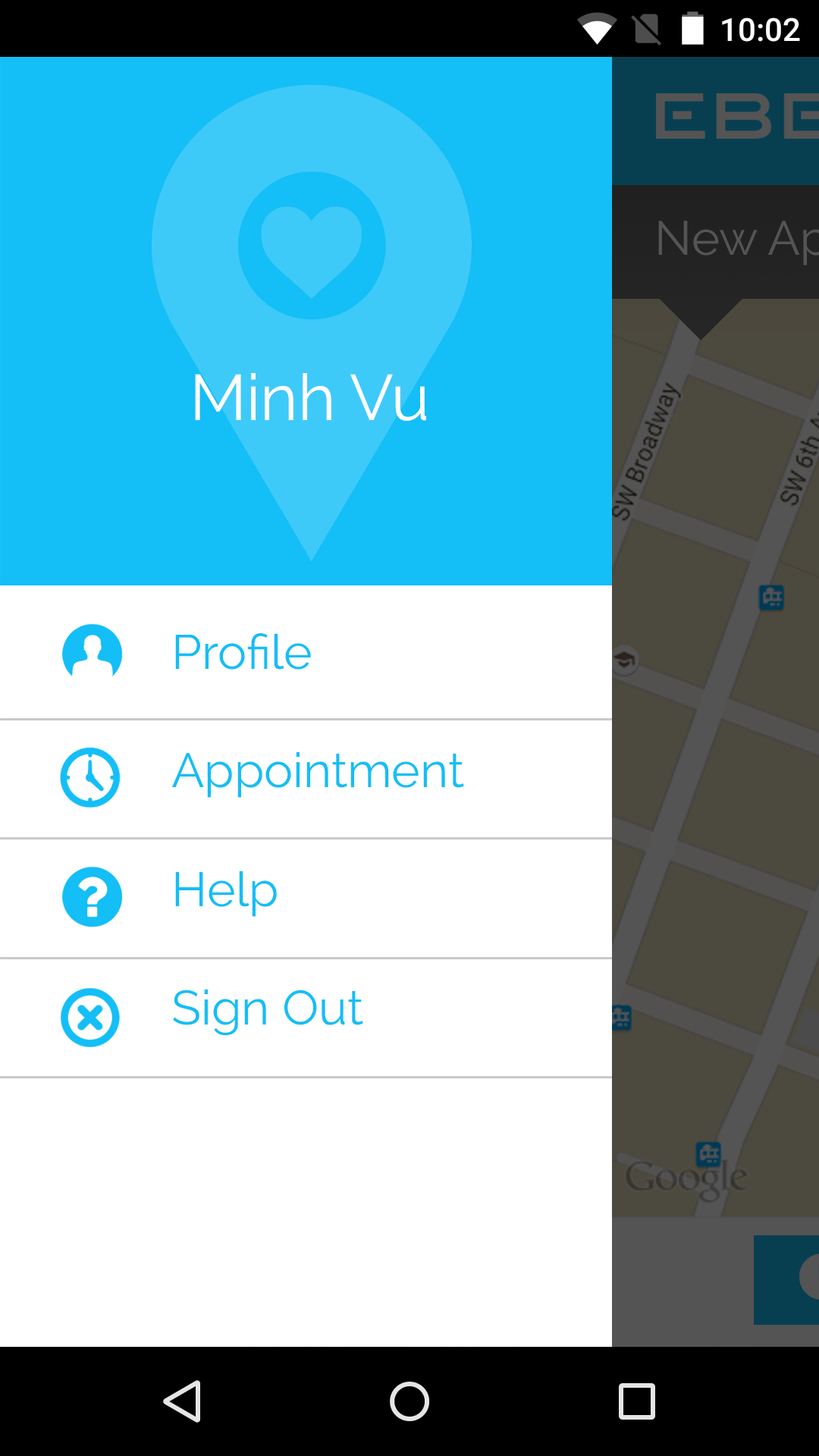
<style>
.page{position:relative;width:819px;height:1456px;background:#ffffff}
.page>*{position:absolute;margin:0}
.t1{font:64.4px "Raleway";color:#ffffff}
.t2{font:48.1px/118.6px "Raleway";color:#14bef6}
</style>
<div class="page">
<p class="t1" style="left:195px;top:373px;width:231px;height:48px">Minh Vu</p>
<p class="t2" style="left:172px;top:633px;width:292px;height:403px">Profile<br>Appointment<br>Help<br>Sign Out</p>
</div>
